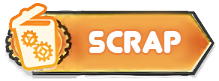
<style>
.page{position:relative;width:219px;height:81px;background:#ffffff}
.page>*{position:absolute;margin:0}
.t1{font:36px "Junegull";color:#fefefe}
</style>
<div class="page">
<p class="t1" style="left:89px;top:31px;width:92px;height:22px">SCRAP</p>
</div>
